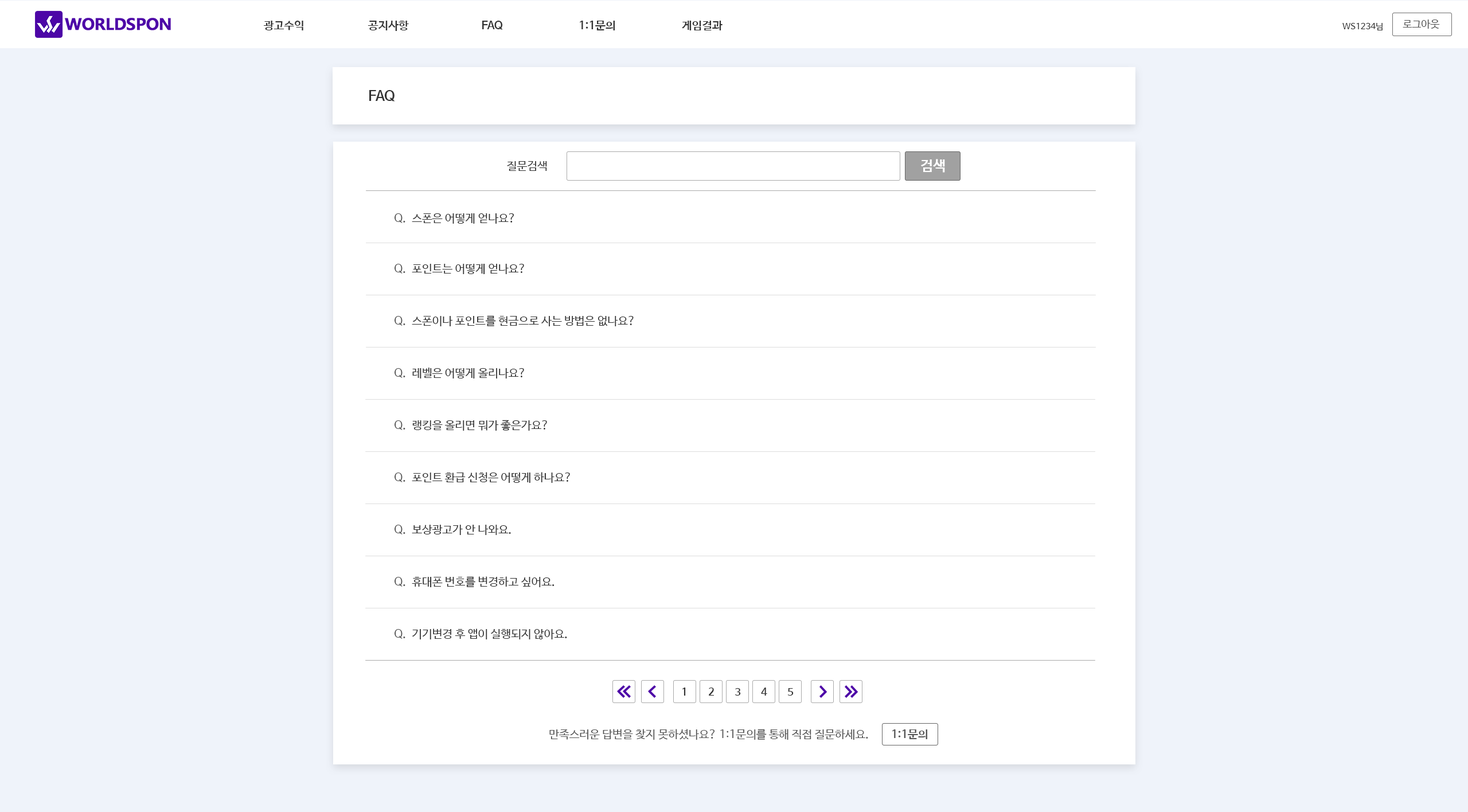
<style>
.page{position:relative;width:1468px;height:812px;background:#ffffff}
.page>*{position:absolute;margin:0}
.t1{font:11.5px "NanumBarunGothicBold";color:#333333;text-transform:uppercase}
.t2{font:8.6px "NanumBarunGothic";color:#333333;text-transform:uppercase}
.t3{font:10.3px "NanumBarunGothic";color:#555555;text-transform:uppercase}
.t4{font:14.3px "NanumBarunGothicBold";color:#333333;text-transform:uppercase}
.t5{font:11.5px "NanumBarunGothic";color:#333333;text-transform:uppercase}
.t6{font:14.3px "NanumBarunGothicBold";color:#ffffff;text-transform:uppercase}
.t7{font:11.5px "NanumBarunGothic";color:#555555;text-transform:uppercase}
.t8{font:10.3px "NanumBarunGothicBold";color:#333333;text-transform:uppercase}
.t9{font:11.5px "NanumBarunGothicBold";color:#555555;text-transform:uppercase}
</style>
<div class="page">
<p class="t1" style="left:264px;top:21px;width:39px;height:9px">광고수익</p>
<p class="t1" style="left:368px;top:21px;width:41px;height:10px">공지사항</p>
<p class="t1" style="left:482px;top:21px;width:21px;height:9px">faq</p>
<p class="t1" style="left:580px;top:21px;width:35px;height:9px">1:1문의</p>
<p class="t1" style="left:682px;top:21px;width:41px;height:9px">게임결과</p>
<p class="t2" style="left:1343px;top:23px;width:40px;height:7px">ws1234님</p>
<p class="t3" style="left:1403px;top:20px;width:37px;height:9px">로그아웃</p>
<p class="t4" style="left:369px;top:90px;width:26px;height:12px">faq</p>
<p class="t5" style="left:507px;top:161px;width:40px;height:10px">질문검색</p>
<p class="t6" style="left:921px;top:159px;width:24px;height:14px">검색</p>
<p class="t7" style="left:395px;top:213px;width:10px;height:10px">Q.</p>
<p class="t5" style="left:412px;top:213px;width:102px;height:11px">스폰은 어떻게 얻나요?</p>
<p class="t7" style="left:395px;top:264px;width:10px;height:10px">Q.</p>
<p class="t5" style="left:412px;top:264px;width:112px;height:10px">포인트는 어떻게 얻나요?</p>
<p class="t7" style="left:395px;top:316px;width:10px;height:10px">Q.</p>
<p class="t5" style="left:412px;top:315px;width:222px;height:11px">스폰이나 포인트를 현금으로 사는 방법은 없나요?</p>
<p class="t7" style="left:395px;top:368px;width:10px;height:10px">Q.</p>
<p class="t5" style="left:412px;top:368px;width:112px;height:11px">레벨은 어떻게 올리나요?</p>
<p class="t7" style="left:395px;top:420px;width:10px;height:10px">Q.</p>
<p class="t5" style="left:412px;top:420px;width:135px;height:11px">랭킹을 올리면 뭐가 좋은가요?</p>
<p class="t7" style="left:395px;top:473px;width:10px;height:9px">Q.</p>
<p class="t5" style="left:412px;top:472px;width:158px;height:11px">포인트 환급 신청은 어떻게 하나요?</p>
<p class="t7" style="left:395px;top:525px;width:10px;height:10px">Q.</p>
<p class="t5" style="left:412px;top:525px;width:99px;height:10px">보상광고가 안 나와요.</p>
<p class="t7" style="left:395px;top:577px;width:10px;height:10px">Q.</p>
<p class="t5" style="left:412px;top:576px;width:143px;height:11px">휴대폰 번호를 변경하고 싶어요.</p>
<p class="t7" style="left:395px;top:629px;width:10px;height:10px">Q.</p>
<p class="t5" style="left:412px;top:629px;width:155px;height:10px">기기변경 후 앱이 실행되지 않아요.</p>
<p class="t8" style="left:683px;top:688px;width:3px;height:8px">1</p>
<p class="t8" style="left:709px;top:688px;width:5px;height:8px">2</p>
<p class="t8" style="left:735px;top:688px;width:6px;height:8px">3</p>
<p class="t8" style="left:761px;top:688px;width:6px;height:8px">4</p>
<p class="t8" style="left:788px;top:688px;width:6px;height:8px">5</p>
<p class="t7" style="left:549px;top:729px;width:319px;height:11px">만족스러운 답변을 찾지 못하셨나요? 1:1문의를 통해 직접 질문하세요.</p>
<p class="t9" style="left:892px;top:730px;width:35px;height:9px">1:1문의</p>
</div>
